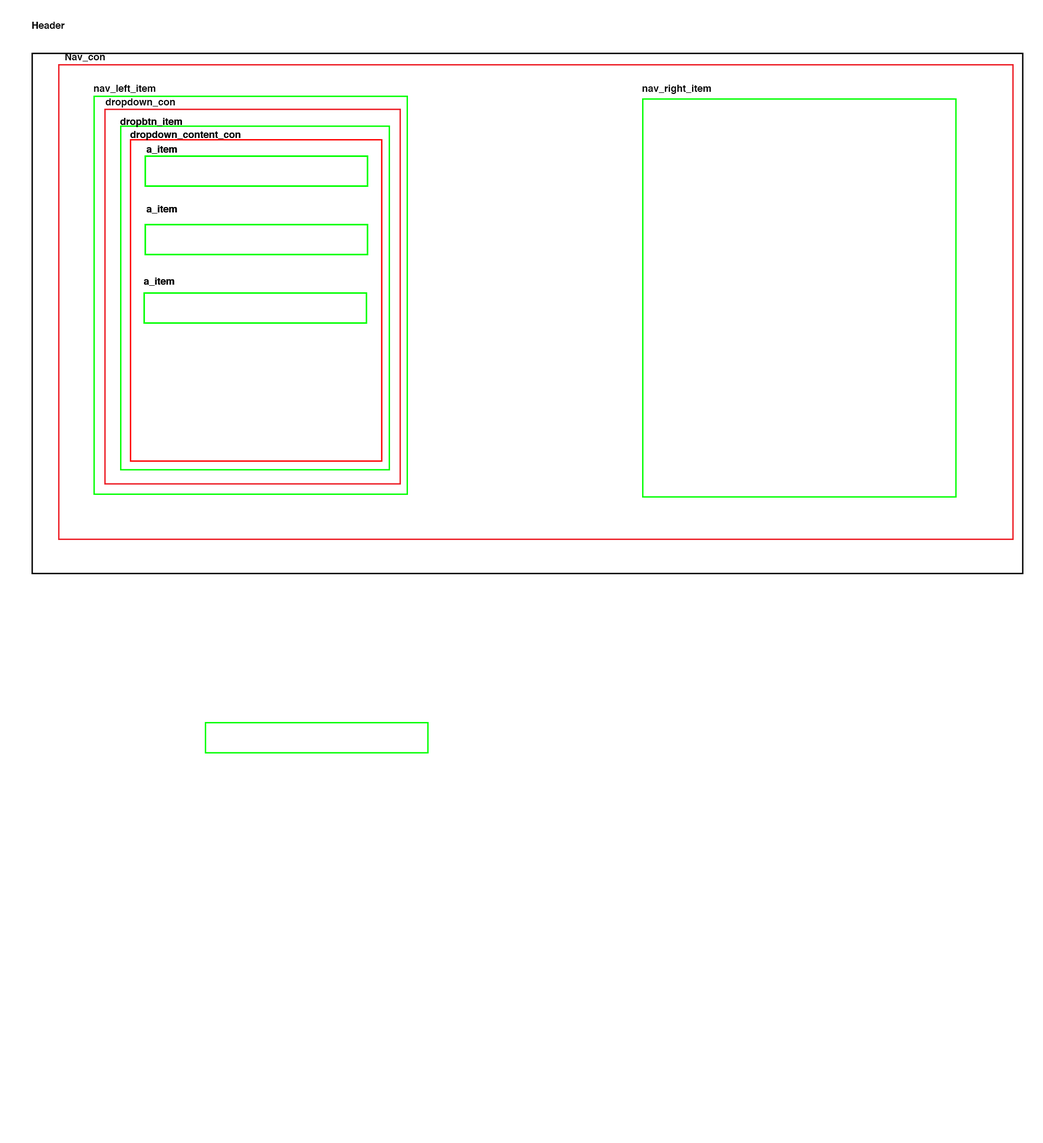
<style>
.page{position:relative;width:1043px;height:1143px;background:#ffffff}
.page>*{position:absolute;margin:0}
.t1{font:9.8px "Helvetica-Bold";color:#000000}
</style>
<div class="page">
<p class="t1" style="left:32px;top:22px;width:33px;height:7px">Header</p>
<p class="t1" style="left:65px;top:53px;width:40px;height:8px">Nav_con</p>
<p class="t1" style="left:94px;top:85px;width:61px;height:8px">nav_left_item</p>
<p class="t1" style="left:642px;top:85px;width:69px;height:9px">nav_right_item</p>
<p class="t1" style="left:105px;top:98px;width:70px;height:10px">dropdown_con</p>
<p class="t1" style="left:120px;top:118px;width:62px;height:9px">dropbtn_item</p>
<p class="t1" style="left:120px;top:118px;width:62px;height:9px">dropbtn_item</p>
<p class="t1" style="left:130px;top:131px;width:111px;height:9px">dropdown_content_con</p>
<p class="t1" style="left:130px;top:131px;width:111px;height:9px">dropdown_content_con</p>
<p class="t1" style="left:147px;top:146px;width:30px;height:8px">a_item</p>
<p class="t1" style="left:147px;top:146px;width:30px;height:8px">a_item</p>
<p class="t1" style="left:147px;top:146px;width:30px;height:8px">a_item</p>
<p class="t1" style="left:147px;top:205px;width:30px;height:9px">a_item</p>
<p class="t1" style="left:147px;top:205px;width:30px;height:9px">a_item</p>
<p class="t1" style="left:147px;top:205px;width:30px;height:9px">a_item</p>
<p class="t1" style="left:144px;top:278px;width:30px;height:8px">a_item</p>
<p class="t1" style="left:144px;top:278px;width:30px;height:8px">a_item</p>
<p class="t1" style="left:144px;top:278px;width:30px;height:8px">a_item</p>
</div>
